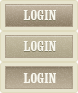
<style>
.page{position:relative;width:78px;height:93px;background:#e7e4cf}
.page>*{position:absolute;margin:0}
.t1{font:14px "ClarendonBT-BoldCondensed";color:#f7f6ed}
</style>
<div class="page">
<p class="t1" style="left:23px;top:10px;width:34px;height:10px">LOGIN</p>
<p class="t1" style="left:23px;top:41px;width:34px;height:10px">LOGIN</p>
<p class="t1" style="left:23px;top:73px;width:34px;height:10px">LOGIN</p>
</div>
